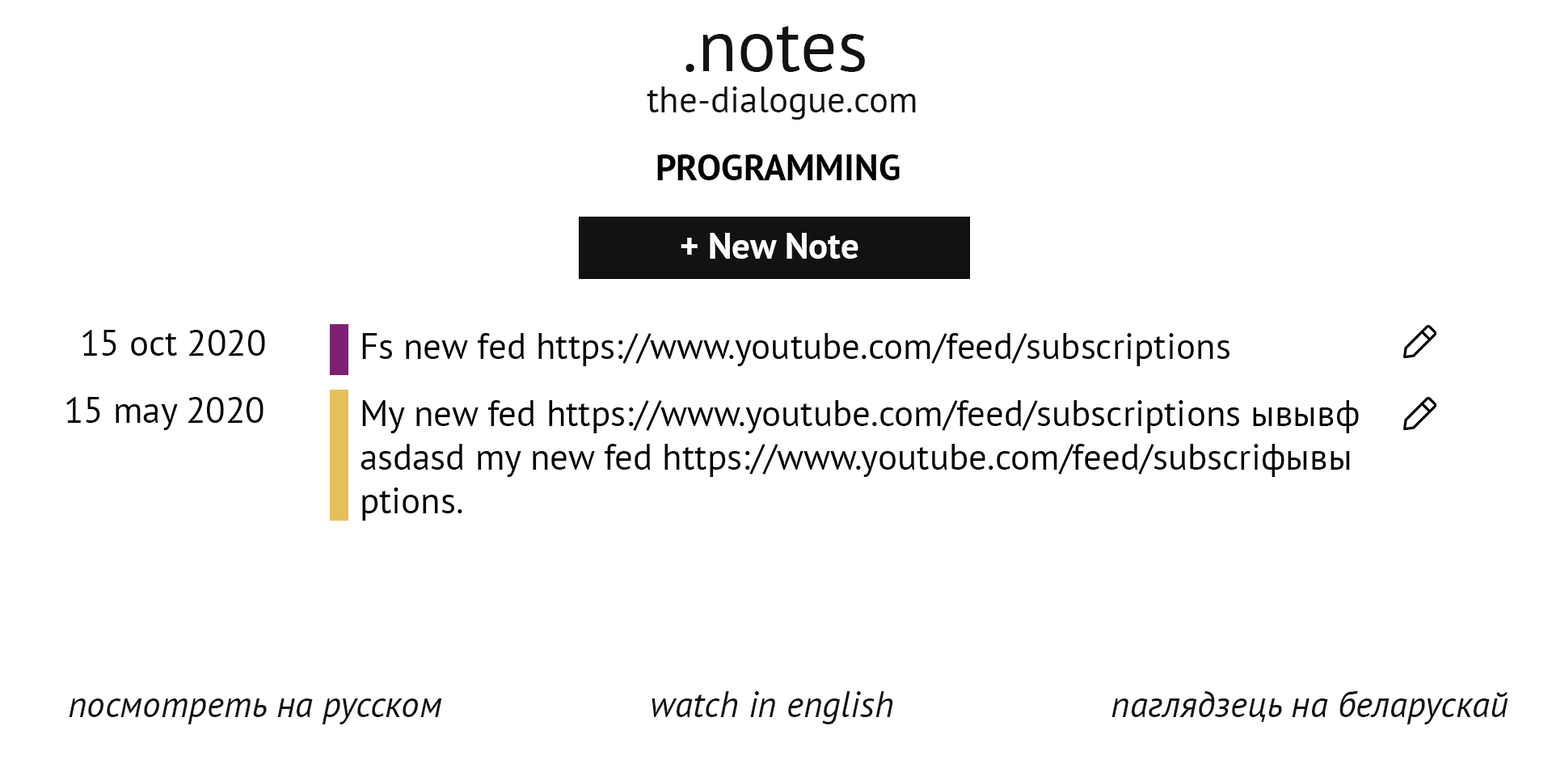
<style>
.page{position:relative;width:1552px;height:768px;background:#ffffff}
.page>*{position:absolute;margin:0}
.t1{font:72.8px "PTSans-Regular";color:#121212}
.t2{font:36.4px "PTSans-Regular";color:#121212}
.t3{font:36.4px "PTSans-Bold";color:#000000}
.t4{font:36.4px "PTSans-Bold";color:#ffffff}
.t5{font:36.4px "PTSans-Regular";color:#000000}
.t6{font:36.4px "PTSans-Italic";color:#121212}
</style>
<div class="page">
<p class="t1" style="left:686px;top:26px;width:179px;height:46px">.notes</p>
<p class="t2" style="left:647px;top:87px;width:269px;height:33px">the-dialogue.com</p>
<p class="t3" style="left:657px;top:154px;width:243px;height:26px">PROGRAMMING</p>
<p class="t4" style="left:681px;top:233px;width:178px;height:26px">+ New Note</p>
<p class="t5" style="left:82px;top:330px;width:183px;height:26px">15 oct 2020</p>
<p class="t5" style="left:362px;top:333px;width:868px;height:33px">Fs new fed https://www.youtube.com/feed/subscriptions</p>
<p class="t5" style="left:66px;top:397px;width:198px;height:33px">15 may 2020</p>
<p class="t5" style="left:361px;top:400px;width:998px;height:121px">My new fed https://www.youtube.com/feed/subscriptions ывывф<br>          asdasd my new fed https://www.youtube.com/feed/subscriфывы<br>          ptions.</p>
<p class="t6" style="left:69px;top:699px;width:373px;height:25px">посмотреть на русском</p>
<p class="t6" style="left:652px;top:691px;width:241px;height:33px">watch in english</p>
<p class="t6" style="left:1112px;top:690px;width:397px;height:34px">паглядзець на беларускай</p>
</div>
